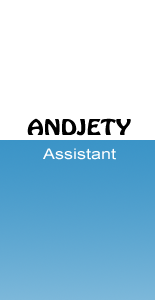
<style>
.page{position:relative;width:155px;height:300px;background:#ffffff}
.page>*{position:absolute;margin:0}
.t1{font:19.2px "HoboStd";color:#000000;scale:1.25 1}
.t2{font:14.4px "ArialMT";color:#ffffff;scale:1.25 1}
</style>
<div class="page">
<p class="t1" style="left:27px;top:118px;width:104px;height:18px">ANDJETY</p>
<p class="t2" style="left:43px;top:148px;width:73px;height:12px">Assistant</p>
</div>
